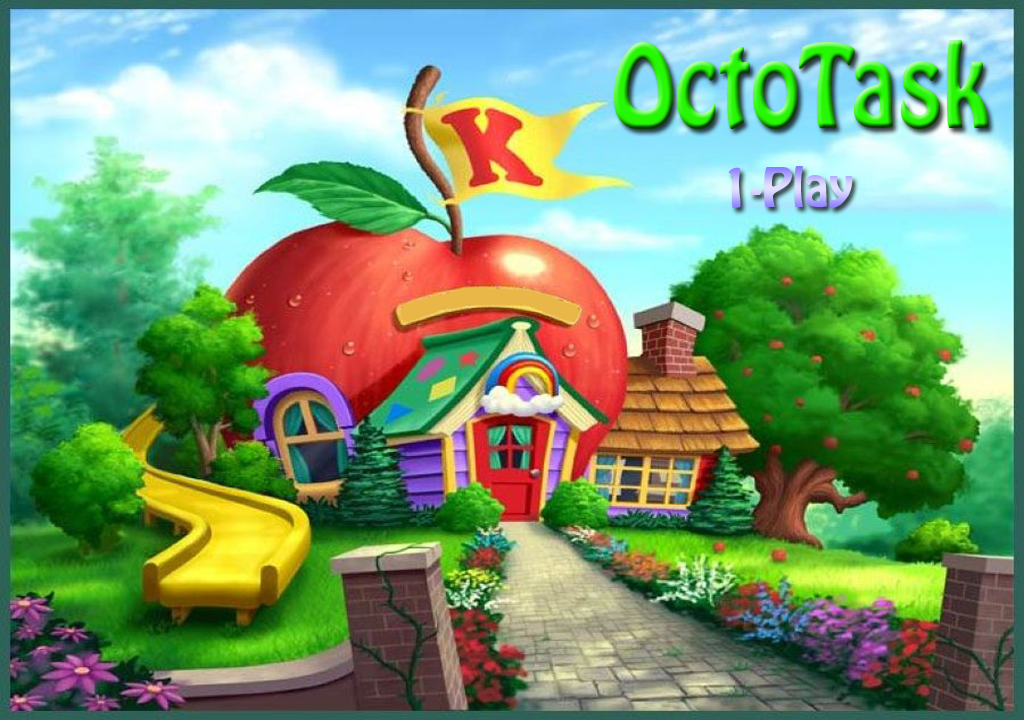
<style>
.page{position:relative;width:1024px;height:720px}
.page>*{position:absolute;margin:0}
.t1{font:102.7px "HoboStd";scale:0.87 1}
.t2{font:48px "HoboStd"}
</style>
<div class="page">
<p class="t1" style="left:614px;top:40px;width:375px;height:90px">OctoTask</p>
<p class="t2" style="left:728px;top:166px;width:125px;height:42px">1-Play</p>
</div>
